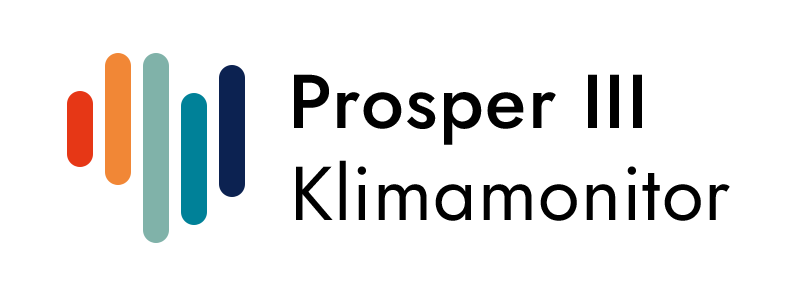
<style>
.page{position:relative;width:800px;height:290px;background:#ffffff}
.page>*{position:absolute;margin:0}
.t1{font:76px "Jost-Medium";letter-spacing:0.02em;color:#000000}
.t2{font:76px "Jost-Book";letter-spacing:0.014em;color:#000000}
</style>
<div class="page">
<p class="t1" style="left:294px;top:74px;width:348px;height:71px">Prosper III</p>
<p class="t2" style="left:296px;top:160px;width:434px;height:61px">Klimamonitor</p>
</div>
